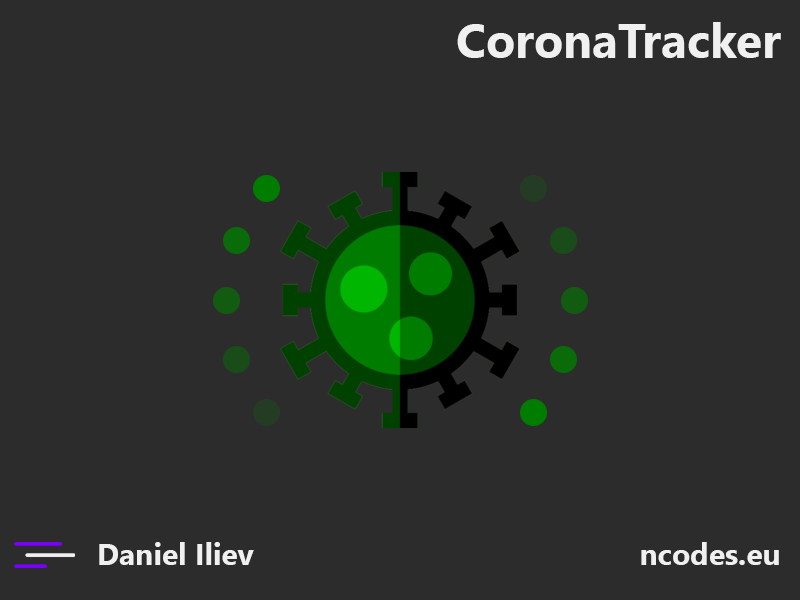
<style>
.page{position:relative;width:800px;height:600px;background:#2c2c2c}
.page>*{position:absolute;margin:0}
.t1{font:48px "NirmalaUI-Bold";color:#f0f0f0}
.t2{font:30px "NirmalaUI-Bold";color:#f0f0f0}
</style>
<div class="page">
<p class="t1" style="left:457px;top:22px;width:324px;height:36px">CoronaTracker</p>
<p class="t2" style="left:99px;top:542px;width:155px;height:23px">Daniel Iliev</p>
<p class="t2" style="left:641px;top:542px;width:138px;height:23px">ncodes.eu</p>
</div>
